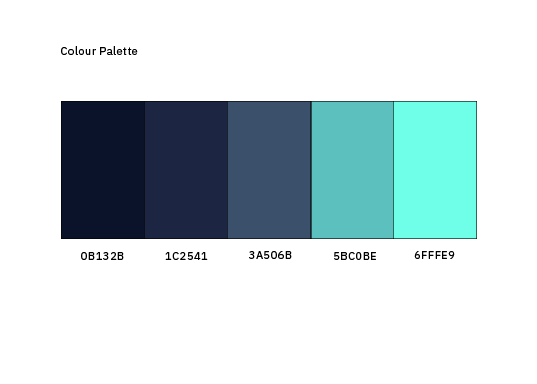
<style>
.page{position:relative;width:537px;height:384px;background:#ffffff}
.page>*{position:absolute;margin:0}
.t1{font:11px "IBMPlexSans";letter-spacing:0.05em;color:#000000}
</style>
<div class="page">
<p class="t1" style="left:61px;top:46px;width:77px;height:9px">Colour Palette</p>
<p class="t1" style="left:81px;top:252px;width:43px;height:8px">0B132B</p>
<p class="t1" style="left:165px;top:252px;width:43px;height:8px">1C2541</p>
<p class="t1" style="left:249px;top:251px;width:43px;height:8px">3A506B</p>
<p class="t1" style="left:334px;top:252px;width:42px;height:8px">5BC0BE</p>
<p class="t1" style="left:414px;top:251px;width:41px;height:8px">6FFFE9</p>
</div>
